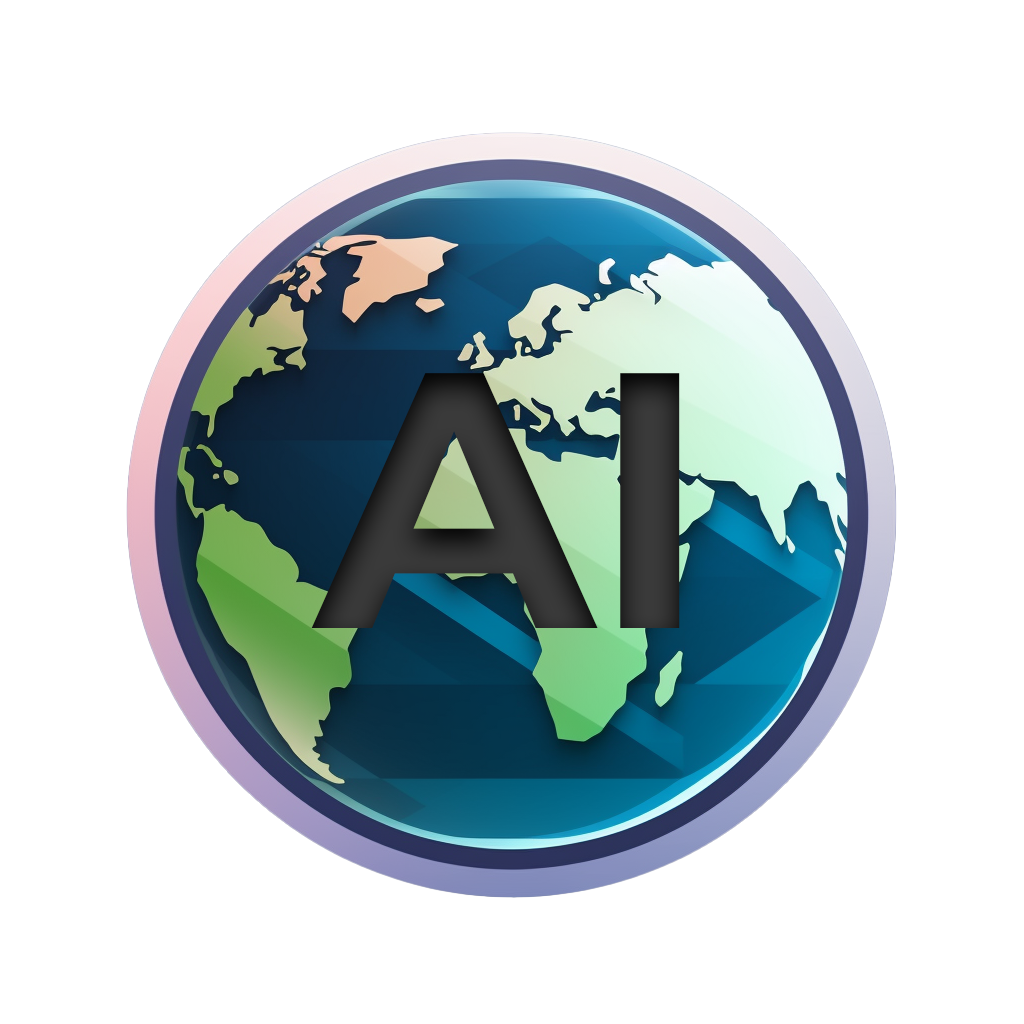
<style>
.page{position:relative;width:1024px;height:1024px;background:#ffffff}
.page>*{position:absolute;margin:0}
.t1{font:364.1px "Montserrat-Bold";letter-spacing:-0.01em;color:#3a3a3a}
</style>
<div class="page">
<p class="t1" style="left:311px;top:373px;width:369px;height:255px">AI</p>
</div>
